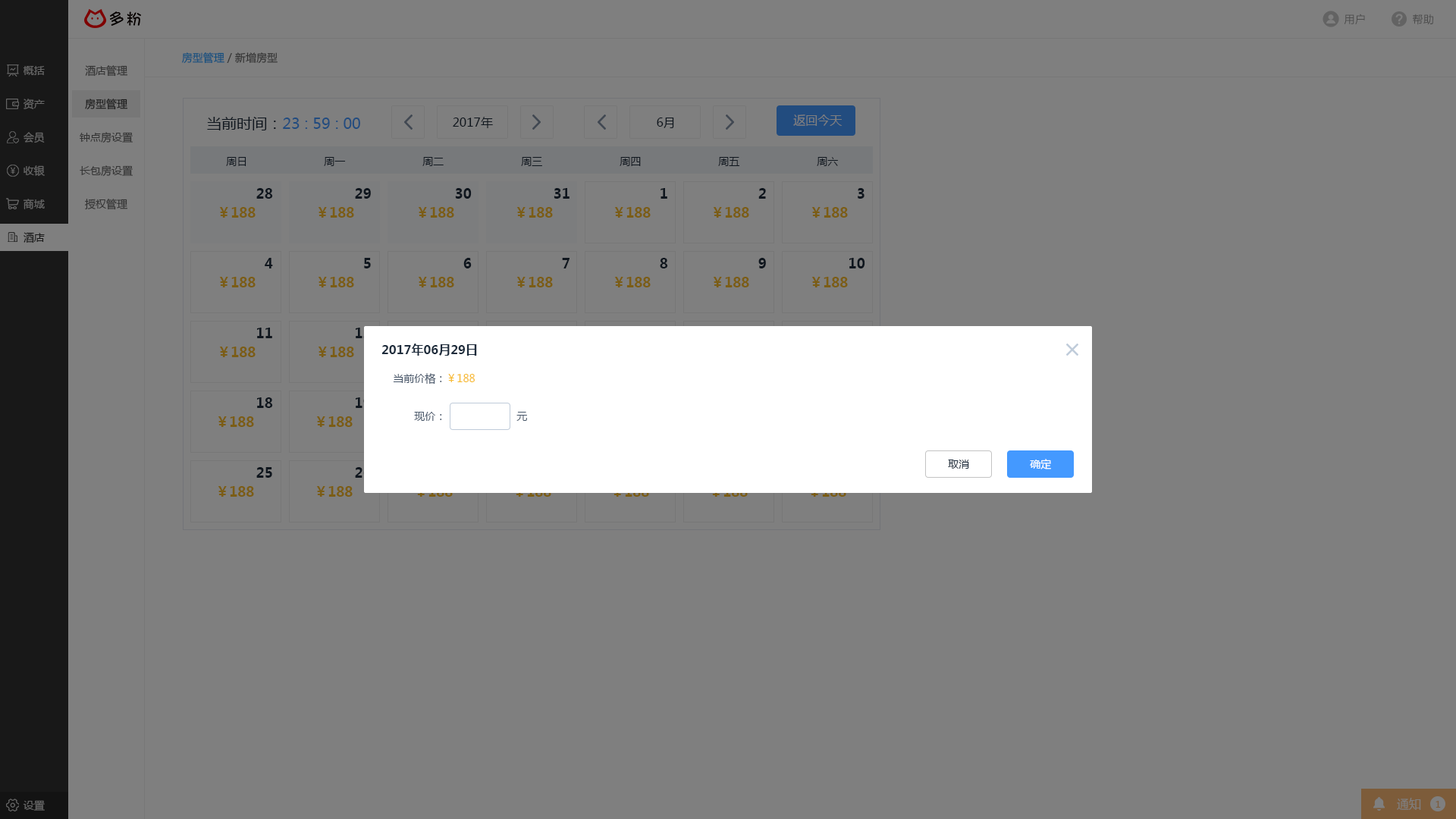
<style>
.page{position:relative;width:1456px;height:819px;background:#7f7f7f}
.page>*{position:absolute;margin:0}
.t1{font:10.6px "MicrosoftYaHei";letter-spacing:0.025em;color:#4c4c4c}
.t2{font:10.6px "MicrosoftYaHei"}
.t3{font:10.6px "MicrosoftYaHei";color:#666666}
.t4{font:10.6px "MicrosoftYaHei";color:#333333}
.t5{font:10.6px "MicrosoftYaHei";color:#191919}
.t6{font:15.2px "MicrosoftYaHei"}
.t7{font:12.1px "MicrosoftYaHei";color:#0f161e}
.t8{font:12.1px "MicrosoftYaHei";color:#7f7f7f}
.t9{font:10.6px "MicrosoftYaHei";color:#0f161e}
.t10{font:13.6px "MicrosoftYaHei-Bold";color:#0f161e}
.t11{font:13.6px "MicrosoftYaHei-Bold";color:#7b5d15}
.t12{font:10.6px "MicrosoftYaHei";color:#181818}
.t13{font:12.1px "MicrosoftYaHei-Bold";color:#1f2d3d}
.t14{font:10.6px "MicrosoftYaHei";color:#48576a}
.t15{font:10.6px "MicrosoftYaHei";color:#f7ba2a}
.t16{font:10.6px "MicrosoftYaHei";color:#1f2d3d}
.t17{font:10.6px "MicrosoftYaHei";color:#ffffff}
.t18{font:9.1px "MicrosoftYaHei";color:#7d5c3a}
</style>
<div class="page">
<p class="t1" style="left:1344px;top:14px;width:21px;height:11px">用户</p>
<p class="t1" style="left:1413px;top:14px;width:20px;height:11px">帮助</p>
<p class="t2" style="left:182px;top:52px;width:96px;height:12px">房型管理 / 新增房型</p>
<p class="t3" style="left:23px;top:66px;width:22px;height:9px">概括</p>
<p class="t4" style="left:85px;top:65px;width:42px;height:12px">酒店管理</p>
<p class="t3" style="left:24px;top:99px;width:21px;height:10px">资产</p>
<p class="t5" style="left:85px;top:99px;width:42px;height:11px">房型管理</p>
<p class="t6" style="left:207px;top:117px;width:153px;height:13px">当前时间：23 : 59 : 00</p>
<p class="t7" style="left:453px;top:117px;width:40px;height:11px">2017年</p>
<p class="t7" style="left:657px;top:118px;width:17px;height:10px">6月</p>
<p class="t8" style="left:793px;top:115px;width:49px;height:11px">返回今天</p>
<p class="t3" style="left:24px;top:132px;width:21px;height:11px">会员</p>
<p class="t4" style="left:80px;top:132px;width:53px;height:11px">钟点房设置</p>
<p class="t9" style="left:226px;top:157px;width:20px;height:9px">周日</p>
<p class="t9" style="left:324px;top:157px;width:22px;height:9px">周一</p>
<p class="t9" style="left:422px;top:157px;width:22px;height:9px">周二</p>
<p class="t9" style="left:521px;top:157px;width:21px;height:9px">周三</p>
<p class="t9" style="left:620px;top:157px;width:21px;height:9px">周四</p>
<p class="t9" style="left:718px;top:157px;width:22px;height:9px">周五</p>
<p class="t9" style="left:817px;top:157px;width:21px;height:9px">周六</p>
<p class="t3" style="left:24px;top:165px;width:21px;height:11px">收银</p>
<p class="t4" style="left:80px;top:165px;width:53px;height:12px">长包房设置</p>
<p class="t10" style="left:256px;top:188px;width:17px;height:11px">28</p>
<p class="t10" style="left:355px;top:188px;width:16px;height:11px">29</p>
<p class="t10" style="left:455px;top:188px;width:17px;height:11px">30</p>
<p class="t10" style="left:554px;top:188px;width:16px;height:11px">31</p>
<p class="t10" style="left:660px;top:188px;width:7px;height:11px">1</p>
<p class="t10" style="left:758px;top:188px;width:8px;height:11px">2</p>
<p class="t10" style="left:858px;top:188px;width:6px;height:11px">3</p>
<p class="t3" style="left:23px;top:199px;width:22px;height:10px">商城</p>
<p class="t4" style="left:85px;top:199px;width:42px;height:11px">授权管理</p>
<p class="t11" style="left:219px;top:207px;width:37px;height:11px">￥188</p>
<p class="t11" style="left:318px;top:207px;width:36px;height:11px">￥188</p>
<p class="t11" style="left:418px;top:207px;width:36px;height:11px">￥188</p>
<p class="t11" style="left:516px;top:207px;width:37px;height:11px">￥188</p>
<p class="t11" style="left:614px;top:207px;width:37px;height:11px">￥188</p>
<p class="t11" style="left:713px;top:207px;width:36px;height:11px">￥188</p>
<p class="t11" style="left:811px;top:207px;width:37px;height:11px">￥188</p>
<p class="t12" style="left:24px;top:232px;width:21px;height:11px">酒店</p>
<p class="t10" style="left:265px;top:258px;width:8px;height:10px">4</p>
<p class="t10" style="left:364px;top:258px;width:7px;height:10px">5</p>
<p class="t10" style="left:463px;top:258px;width:9px;height:10px">6</p>
<p class="t10" style="left:562px;top:258px;width:8px;height:10px">7</p>
<p class="t10" style="left:660px;top:258px;width:8px;height:10px">8</p>
<p class="t10" style="left:758px;top:258px;width:8px;height:10px">9</p>
<p class="t10" style="left:849px;top:258px;width:16px;height:10px">10</p>
<p class="t11" style="left:219px;top:277px;width:37px;height:10px">￥188</p>
<p class="t11" style="left:318px;top:277px;width:36px;height:10px">￥188</p>
<p class="t11" style="left:418px;top:277px;width:36px;height:10px">￥188</p>
<p class="t11" style="left:516px;top:277px;width:37px;height:10px">￥188</p>
<p class="t11" style="left:614px;top:277px;width:37px;height:10px">￥188</p>
<p class="t11" style="left:713px;top:277px;width:36px;height:10px">￥188</p>
<p class="t11" style="left:811px;top:277px;width:37px;height:10px">￥188</p>
<p class="t10" style="left:257px;top:328px;width:15px;height:10px">11</p>
<p class="t11" style="left:219px;top:347px;width:37px;height:10px">￥188</p>
<p class="t11" style="left:318px;top:347px;width:36px;height:10px">￥188</p>
<p class="t13" style="left:381px;top:344px;width:96px;height:12px">2017年06月29日</p>
<p class="t14" style="left:393px;top:373px;width:82px;height:11px">当前价格：<span class="t15">￥188</span></p>
<p class="t10" style="left:257px;top:397px;width:16px;height:11px">18</p>
<p class="t14" style="left:414px;top:412px;width:28px;height:9px">现价：</p>
<p class="t14" style="left:516px;top:412px;width:11px;height:9px">元</p>
<p class="t11" style="left:218px;top:416px;width:36px;height:11px">￥188</p>
<p class="t11" style="left:316px;top:416px;width:37px;height:11px">￥188</p>
<p class="t16" style="left:948px;top:460px;width:21px;height:9px">取消</p>
<p class="t17" style="left:1030px;top:459px;width:21px;height:10px">确定</p>
<p class="t10" style="left:256px;top:467px;width:16px;height:11px">25</p>
<p class="t11" style="left:218px;top:486px;width:36px;height:11px">￥188</p>
<p class="t11" style="left:316px;top:486px;width:37px;height:11px">￥188</p>
<p class="t8" style="left:1397px;top:798px;width:24px;height:12px">通知</p>
<p class="t3" style="left:23px;top:800px;width:22px;height:11px">设置</p>
<p class="t18" style="left:1436px;top:801px;width:5px;height:7px">1</p>
</div>
